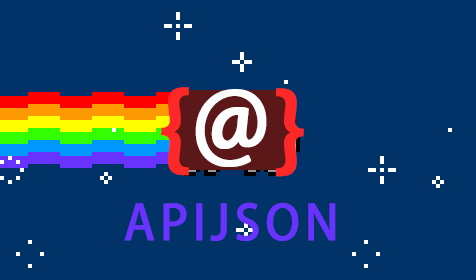
<style>
.page{position:relative;width:476px;height:280px;background:#013368}
.page>*{position:absolute;margin:0}
.t1{font:96px "AdobeHeitiStd-Regular";letter-spacing:-0.05em;color:#ff2828;font-weight:bold}
.t2{font:96px "AdobeHeitiStd-Regular";letter-spacing:-0.05em;color:#ffffff;font-weight:bold}
.t3{font:48px "AdobeHeitiStd-Regular";letter-spacing:0.07em;color:#6832ff;font-weight:bold}
</style>
<div class="page">
<p class="t1" style="left:161px;top:87px;width:28px;height:89px">{</p>
<p class="t2" style="left:195px;top:89px;width:72px;height:78px;rotate:-4deg">@</p>
<p class="t1" style="left:276px;top:88px;width:28px;height:89px">}</p>
<p class="t3" style="left:124px;top:202px;width:212px;height:39px">APIJSON</p>
</div>
